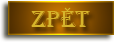
<style>
.page{position:relative;width:114px;height:42px}
.page>*{position:absolute;margin:0}
.t1{font:24px "Algerian";color:#d6b42b}
</style>
<div class="page">
<p class="t1" style="left:31px;top:11px;width:59px;height:16px">ZPET</p>
</div>
